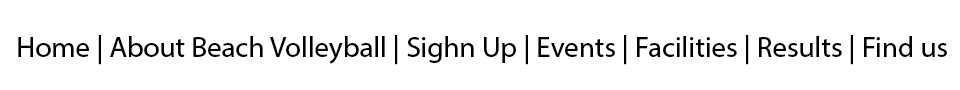
<style>
.page{position:relative;width:960px;height:90px;background:#ffffff}
.page>*{position:absolute;margin:0}
.t1{font:29px "MyriadHebrew-Regular";color:#000000}
</style>
<div class="page">
<p class="t1" style="left:18px;top:35px;width:929px;height:30px">Home | About Beach Volleyball | Sighn Up | Events | Facilities | Results | Find us</p>
</div>
